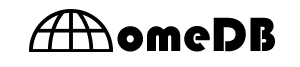
<style>
.page{position:relative;width:300px;height:67px;background:#ffffff}
.page>*{position:absolute;margin:0}
.t1{font:50px "Bauhaus93";color:#000000}
</style>
<div class="page">
<p class="t1" style="left:117px;top:17px;width:158px;height:35px">omeDB</p>
</div>
